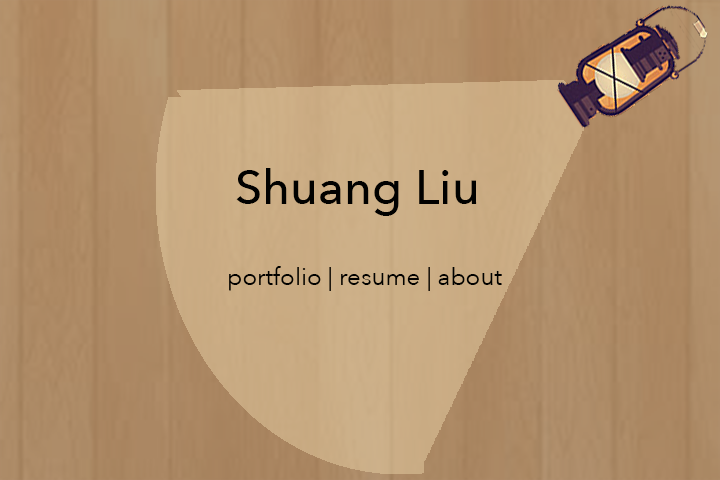
<style>
.page{position:relative;width:720px;height:480px}
.page>*{position:absolute;margin:0}
.t1{font:48px "AvenirNext-Medium";color:#010100}
.t2{font:24px "AvenirNext-Regular";color:#010100}
</style>
<div class="page">
<p class="t1" style="left:236px;top:168px;width:241px;height:48px">Shuang Liu</p>
<p class="t2" style="left:229px;top:266px;width:273px;height:25px">portfolio | resume | about</p>
</div>
